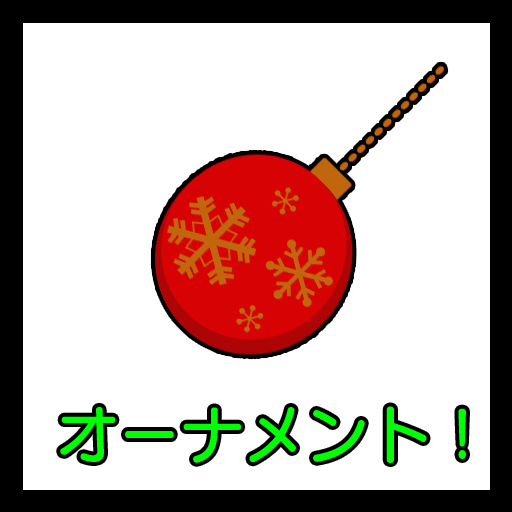
<style>
.page{position:relative;width:512px;height:512px;background:#ffffff}
.page>*{position:absolute;margin:0}
.t1{font:62.5px "SeuratProN-DB";color:#00ff06}
</style>
<div class="page">
<p class="t1" style="left:60px;top:406px;width:406px;height:57px">オーナメント！</p>
</div>
